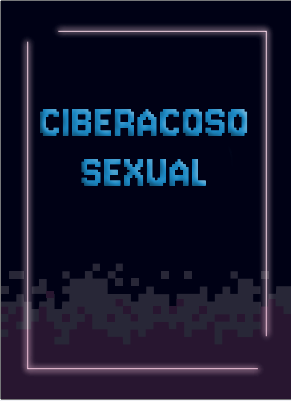
<style>
.page{position:relative;width:291px;height:401px;background:#000115}
.page>*{position:absolute;margin:0}
.t1{font:50px/50px "Jersey10-Regular";letter-spacing:0.025em}
</style>
<div class="page">
<p class="t1" style="left:40px;top:108px;width:208px;height:78px;text-align:center">CIBERACOSO<br>SEXUAL</p>
</div>
